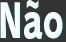
<style>
.page{position:relative;width:66px;height:42px;background:#333333}
.page>*{position:absolute;margin:0}
.t1{font:45.9px "RodinPro-EB";letter-spacing:0.018em;color:#feffff;scale:0.69 1}
</style>
<div class="page">
<p class="t1" style="left:0px;top:0px;width:63px;height:39px">Não</p>
</div>
